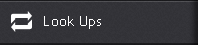
<style>
.page{position:relative;width:198px;height:45px}
.page>*{position:absolute;margin:0}
.t1{font:14px "TrebuchetMS";letter-spacing:0.021em;color:#ffffff}
</style>
<div class="page">
<p class="t1" style="left:44px;top:16px;width:57px;height:13px">Look Ups</p>
</div>
